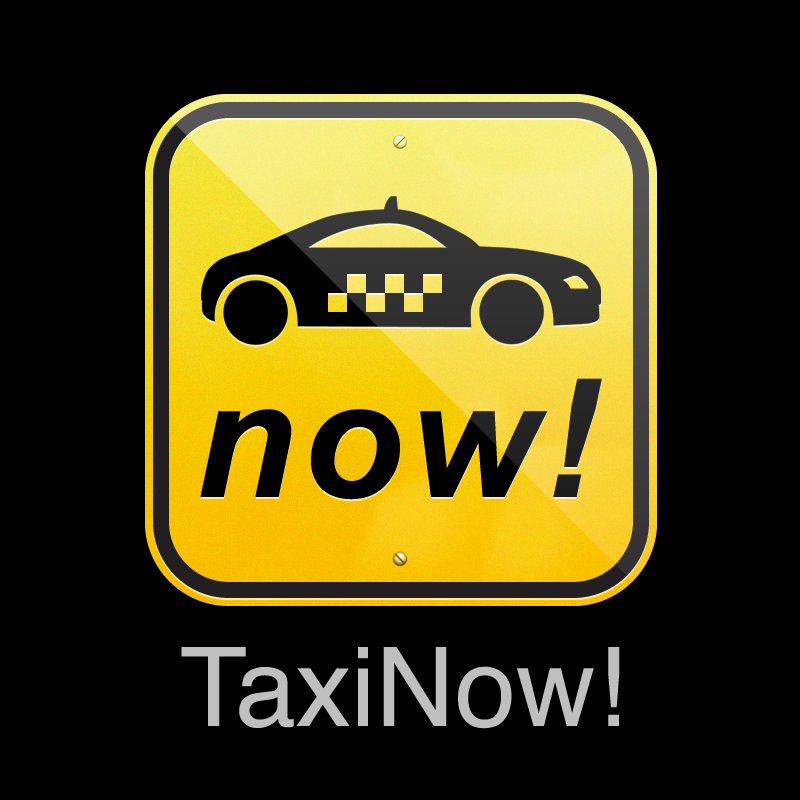
<style>
.page{position:relative;width:800px;height:800px;background:#000000}
.page>*{position:absolute;margin:0}
.t1{font:165px "Arial-BoldItalicMT";letter-spacing:0.04em;color:#000000}
.t2{font:110px "Helvetica";color:#bfbfbf}
</style>
<div class="page">
<p class="t1" style="left:200px;top:378px;width:402px;height:122px">now!</p>
<p class="t2" style="left:181px;top:647px;width:439px;height:82px">TaxiNow!</p>
</div>
